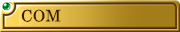
<style>
.page{position:relative;width:180px;height:32px}
.page>*{position:absolute;margin:0}
.t1{font:16px "CenturySchoolbook";letter-spacing:0.025em;color:#321a02}
</style>
<div class="page">
<p class="t1" style="left:21px;top:9px;width:40px;height:13px">COM</p>
</div>
